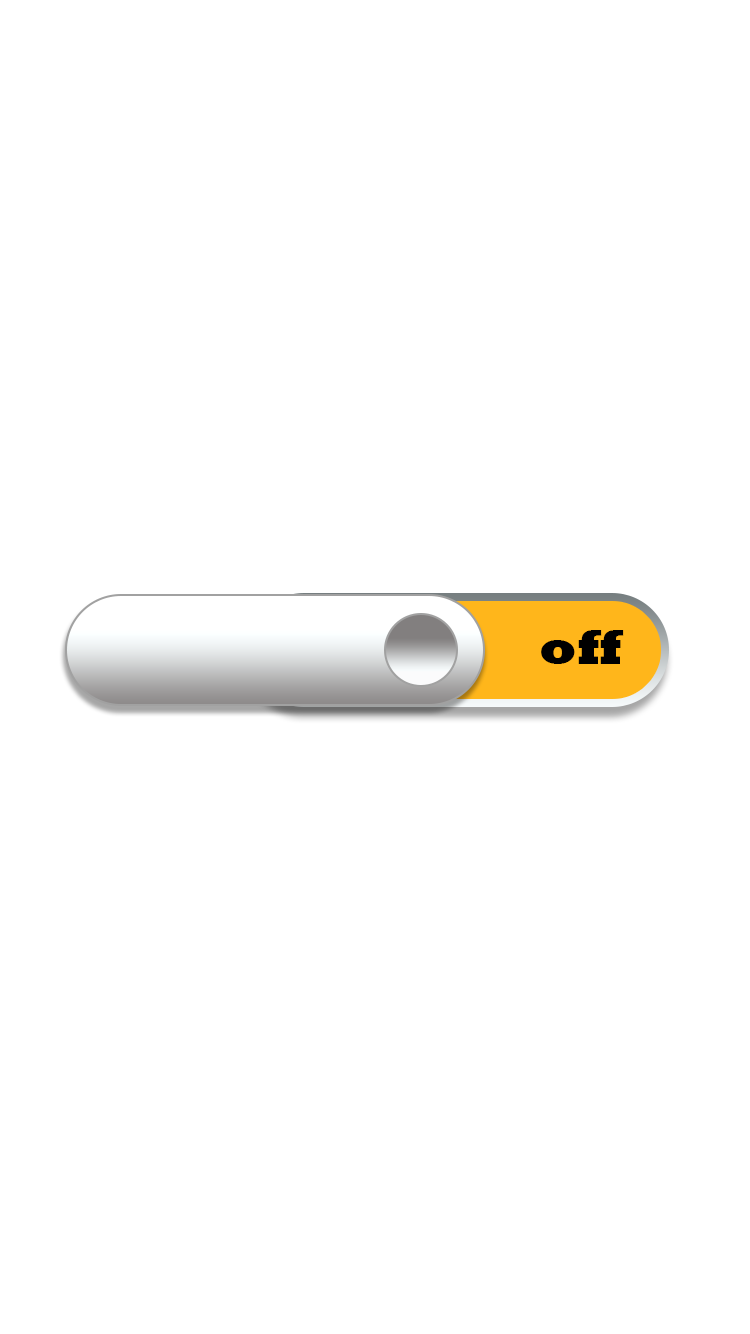
<style>
.page{position:relative;width:750px;height:1334px;background:#ffffff}
.page>*{position:absolute;margin:0}
.t1{font:50px "Rockwell-ExtraBold";color:#000000}
</style>
<div class="page">
<p class="t1" style="left:541px;top:630px;width:83px;height:34px">off</p>
</div>
